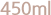
<style>
.page{position:relative;width:51px;height:15px;background:#ffffff}
.page>*{position:absolute;margin:0}
.t1{font:18px "NanumGothicBold";letter-spacing:-0.03em;color:#c1a397}
</style>
<div class="page">
<p class="t1" style="left:0px;top:0px;width:51px;height:15px">450ml</p>
</div>
